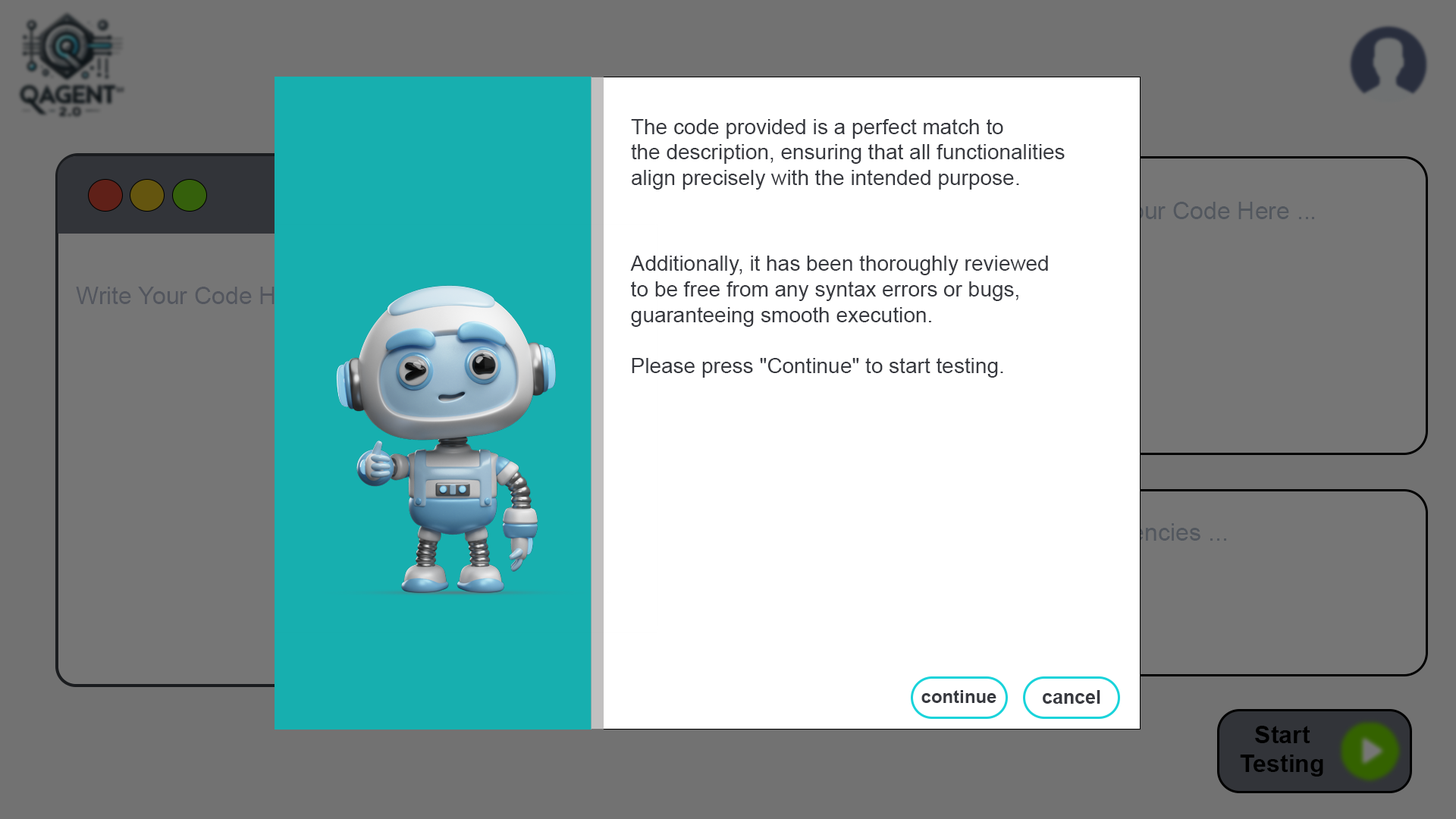
<style>
.page{position:relative;width:1456px;height:819px;background:#727272}
.page>*{position:absolute;margin:0}
.t1{font:21.2px "ArialMT";color:#373a40}
.t2{font:24.3px "ArialMT";color:#53565e}
.t3{font:18.2px "Arial-BoldMT";color:#373a40}
.t4{font:19px "Arial-BoldMT";color:#373a40}
.t5{font:24.3px "Arial-BoldMT";color:#000000}
</style>
<div class="page">
<p class="t1" style="left:631px;top:119px;width:434px;height:71px">The code provided is a perfect match to <br>the description, ensuring that all functionalities<br>align precisely with the intended purpose.</p>
<p class="t1" style="left:630px;top:256px;width:418px;height:122px">Additionally, it has been thoroughly reviewed<br>to be free from any syntax errors or bugs,<br>guaranteeing smooth execution.<br><br>Please press "Continue" to start testing.</p>
<p class="t2" style="left:76px;top:287px;width:261px;height:17px">Write Your Code Here ...</p>
<p class="t3" style="left:921px;top:690px;width:75px;height:13px">continue</p>
<p class="t4" style="left:1043px;top:690px;width:57px;height:14px">cancel</p>
<p class="t5" style="left:1240px;top:726px;width:83px;height:51px;text-align:center">Start<br>Testing</p>
</div>
